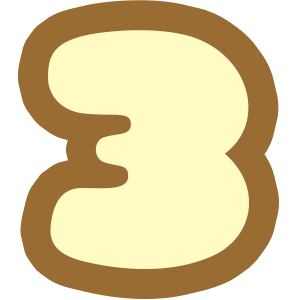
<style>
.page{position:relative;width:300px;height:300px;background:#fffbc2}
.page>*{position:absolute;margin:0}
.t1{font:310.1px "AmeChanPopMaruLight-Regular";letter-spacing:0.08em;color:#fffbc2;scale:1.09 1}
</style>
<div class="page">
<p class="t1" style="left:48px;top:30px;width:201px;height:239px">3</p>
</div>
